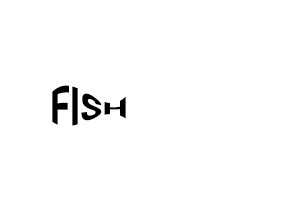
<style>
.page{position:relative;width:300px;height:200px;background:#ffffff}
.page>*{position:absolute;margin:0}
.t1{font:36px "Roboto-Bold";color:#000000}
</style>
<div class="page">
<p class="t1" style="left:52px;top:85px;width:74px;height:41px">FISH</p>
</div>
